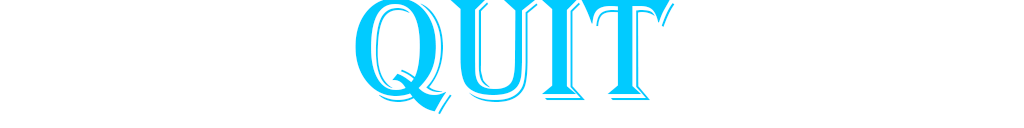
<style>
.page{position:relative;width:1024px;height:128px;background:#ffffff}
.page>*{position:absolute;margin:0}
.t1{font:150px "Algerian";color:#01cbff}
</style>
<div class="page">
<p class="t1" style="left:355px;top:0px;width:320px;height:115px">QUIT</p>
</div>
